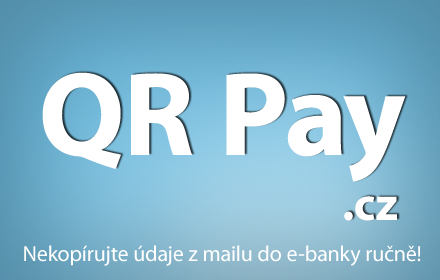
<style>
.page{position:relative;width:440px;height:280px}
.page>*{position:absolute;margin:0}
.t1{font:120px "MyriadPro-Bold";color:#ffffff}
.t2{font:48px "MyriadPro-Bold";color:#ffffff}
.t3{font:22px "MyriadPro-Regular";color:#ffffff}
</style>
<div class="page">
<p class="t1" style="left:42px;top:72px;width:364px;height:110px">QR Pay</p>
<p class="t2" style="left:344px;top:196px;width:53px;height:25px">.cz</p>
<p class="t3" style="left:24px;top:245px;width:397px;height:21px">Nekopírujte údaje z mailu do e-banky ručně!</p>
</div>
